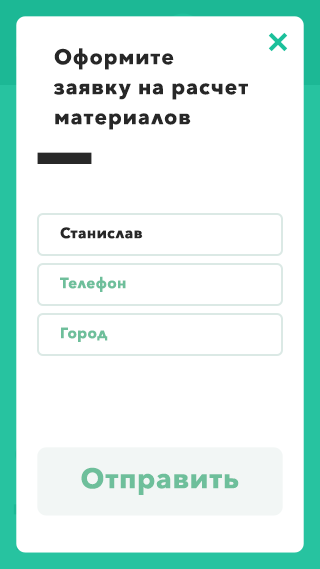
<style>
.page{position:relative;width:320px;height:569px;background:#ffffff}
.page>*{position:absolute;margin:0}
.t1{font:21px/30px "AvenirNext-Bold";letter-spacing:0.05em;color:#272727}
.t2{font:15px "AvenirNext-Bold";letter-spacing:0.025em;color:#272727}
.t3{font:15px "AvenirNext-Bold";letter-spacing:0.025em;color:#6ebf9b}
.t4{font:28px "AvenirNext-Bold";letter-spacing:0.025em;color:#6ebf9b}
</style>
<div class="page">
<p class="t1" style="left:54px;top:48px;width:194px;height:82px">Оформите <br>заявку на расчет <br>материалов</p>
<p class="t2" style="left:60px;top:227px;width:83px;height:12px">Станислав</p>
<p class="t3" style="left:60px;top:276px;width:66px;height:16px">Телефон</p>
<p class="t3" style="left:61px;top:327px;width:47px;height:15px">Город</p>
<p class="t4" style="left:81px;top:467px;width:158px;height:28px">Отправить</p>
</div>
